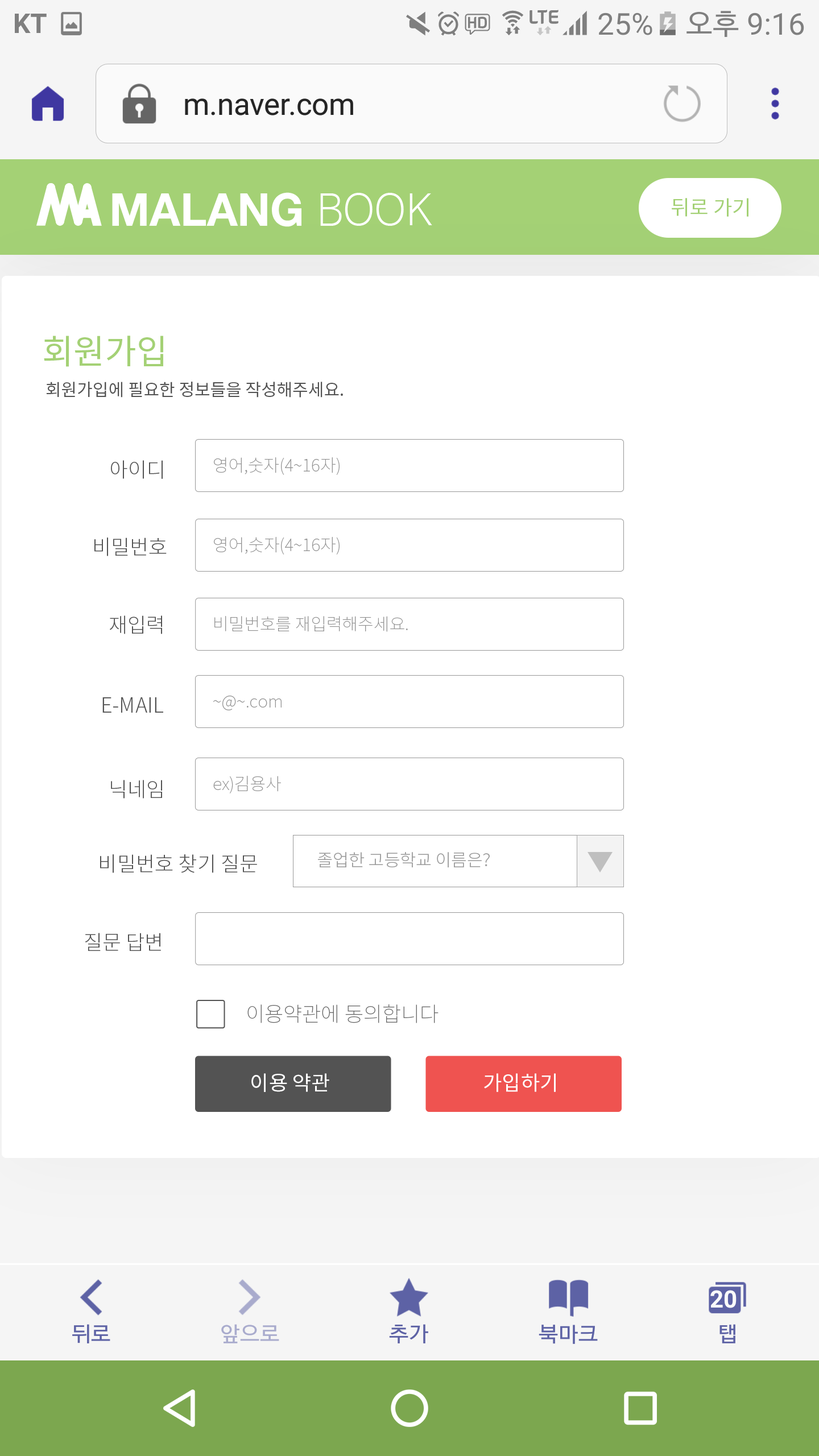
<style>
.page{position:relative;width:819px;height:1456px;background:#ffffff}
.page>*{position:absolute;margin:0}
.t1{font:20.5px "NotoSansCJKkr-Regular";color:#a4d175}
.t2{font:34.1px "NotoSansCJKkr-Regular";color:#a4d175}
.t3{font:17.1px "NotoSansCJKkr-Regular";color:#535353}
.t4{font:20.5px "NotoSansCJKkr-Light";color:#535353}
.t5{font:17.1px "NotoSansCJKkr-Thin";color:#939393}
.t6{font:17.1px "NotoSansCJKkr-Light";color:#9c9c9c}
.t7{font:20.5px "NotoSansCJKkr-Thin";color:#535353}
.t8{font:20.5px "NotoSansCJKkr-Regular";color:#ffffff}
</style>
<div class="page">
<p class="t1" style="left:672px;top:198px;width:76px;height:19px">뒤로 가기</p>
<p class="t2" style="left:44px;top:336px;width:119px;height:31px">회원가입</p>
<p class="t3" style="left:46px;top:382px;width:297px;height:16px">회원가입에 필요한 정보들을 작성해주세요.</p>
<p class="t4" style="left:111px;top:460px;width:52px;height:19px">아이디</p>
<p class="t5" style="left:214px;top:457px;width:126px;height:18px">영어,숫자(4~16자)</p>
<p class="t4" style="left:94px;top:537px;width:73px;height:19px">비밀번호</p>
<p class="t5" style="left:214px;top:537px;width:126px;height:18px">영어,숫자(4~16자)</p>
<p class="t4" style="left:109px;top:615px;width:53px;height:19px">재입력</p>
<p class="t5" style="left:214px;top:616px;width:194px;height:16px">비밀번호를 재입력해주세요.</p>
<p class="t4" style="left:102px;top:697px;width:61px;height:16px">E-MAIL</p>
<p class="t5" style="left:213px;top:696px;width:69px;height:14px">~@~.com</p>
<p class="t4" style="left:111px;top:780px;width:51px;height:19px">닉네임</p>
<p class="t5" style="left:213px;top:776px;width:68px;height:17px">ex)김용사</p>
<p class="t4" style="left:100px;top:854px;width:157px;height:19px">비밀번호 찾기 질문</p>
<p class="t6" style="left:318px;top:852px;width:172px;height:16px">졸업한 고등학교 이름은?</p>
<p class="t4" style="left:85px;top:933px;width:76px;height:18px">질문 답변</p>
<p class="t7" style="left:247px;top:1004px;width:192px;height:19px;opacity:0.9">이용약관에 동의합니다</p>
<p class="t8" style="left:251px;top:1073px;width:78px;height:19px">이용 약관</p>
<p class="t8" style="left:484px;top:1073px;width:72px;height:19px">가입하기</p>
</div>
